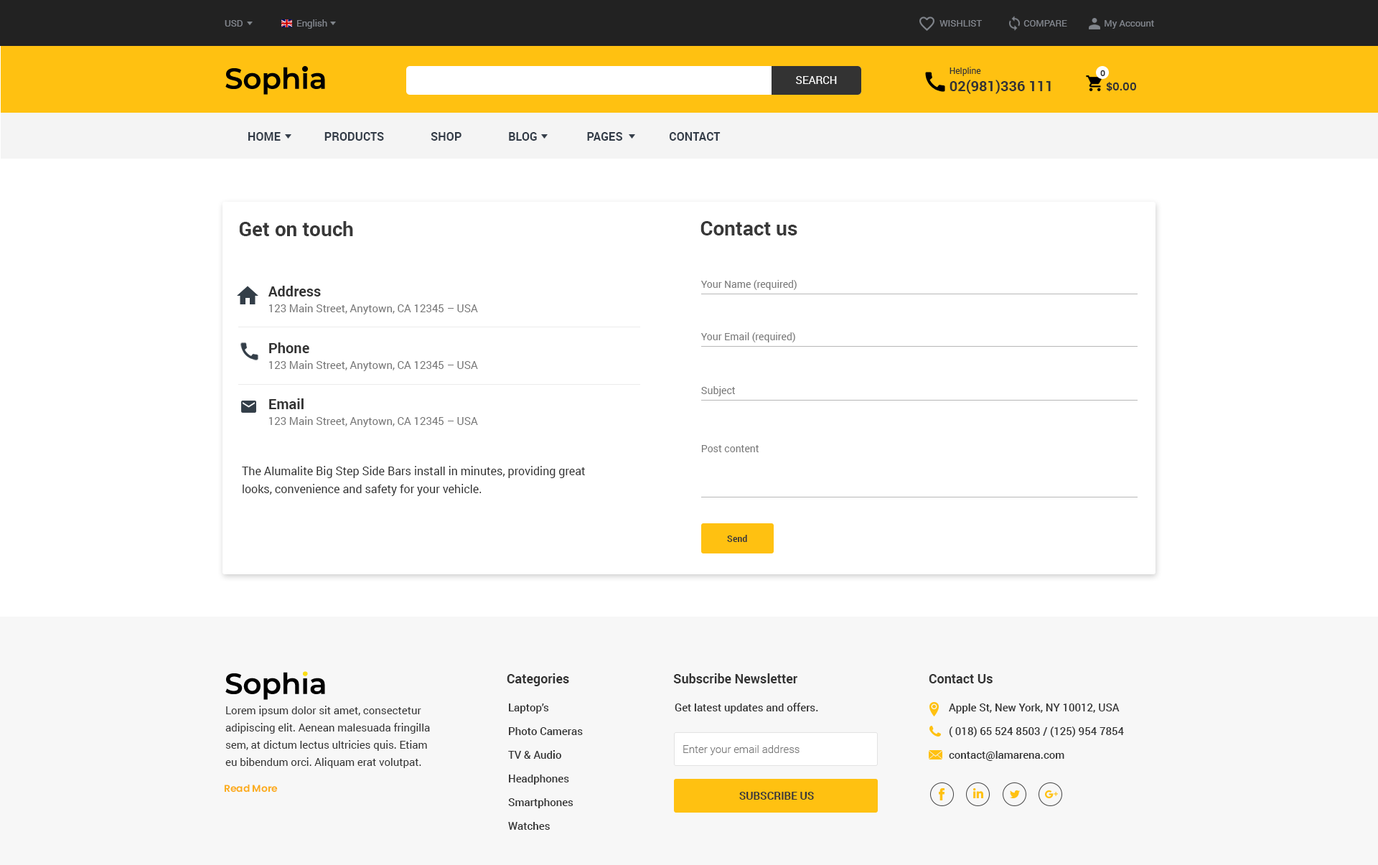
<style>
.page{position:relative;width:1378px;height:865px;background:#ffffff}
.page>*{position:absolute;margin:0}
.t1{font:9.3px "Roboto-Regular";color:#81858c}
.t2{font:10.8px "Roboto-Regular";color:#ffffff}
.t3{font:14.4px "Roboto-Bold";color:#333333}
.t4{font:8.6px "Roboto-Regular";color:#333333}
.t5{font:7.9px "Poppins-SemiBold";color:#333333}
.t6{font:10.8px "Poppins-SemiBold";color:#333333}
.t7{font:11.5px "Roboto-Bold";color:#333c48}
.t8{font:20.1px "Roboto-Bold";color:#383838}
.t9{font:10.1px "Roboto-Regular";color:#777777}
.t10{font:10.8px/15.8px "Roboto-Regular";color:#777777}
.t11{font:14.4px/17.9px "Roboto-Bold";color:#333333}
.t12{font:11.5px/17.9px "Roboto-Regular";color:#333333}
.t13{font:8.7px "Roboto-Bold";color:#383838;scale:1.03 1}
.t14{font:12.9px "Roboto-Bold";color:#333333}
.t15{font:10.8px/17.2px "Roboto-Regular";color:#333333}
.t16{font:10.8px/23.7px "Roboto-Medium";color:#333333}
.t17{font:10.8px "Roboto-Medium";color:#333333}
.t18{font:10.8px "Roboto-Light";color:#777777}
.t19{font:9.7px "Poppins-SemiBold";color:#fbad1a}
.t20{font:10.8px "Roboto-Bold";color:#383838}
</style>
<div class="page">
<p class="t1" style="left:225px;top:20px;width:18px;height:7px">USD</p>
<p class="t1" style="left:297px;top:19px;width:30px;height:10px">English</p>
<p class="t1" style="left:940px;top:20px;width:214px;height:9px">WISHLIST                  COMPARE                My Account</p>
<p class="t2" style="left:796px;top:76px;width:41px;height:8px">SEARCH</p>
<p class="t3" style="left:950px;top:67px;width:101px;height:27px"><span class="t4">Helpline<br></span>02(981)336 111</p>
<p class="t5" style="left:1101px;top:70px;width:5px;height:7px">0</p>
<p class="t6" style="left:1106px;top:82px;width:30px;height:10px">$0.00</p>
<p class="t7" style="left:248px;top:132px;width:473px;height:9px">HOME               PRODUCTS                SHOP                BLOG                 PAGES                CONTACT</p>
<p class="t8" style="left:239px;top:221px;width:114px;height:15px">Get on touch</p>
<p class="t8" style="left:701px;top:221px;width:97px;height:14px">Contact us</p>
<p class="t9" style="left:701px;top:280px;width:96px;height:10px">Your Name (required)</p>
<p class="t10" style="left:268px;top:286px;width:210px;height:28px"><span class="t11">Address<br></span>123 Main Street, Anytown, CA 12345 – USA</p>
<p class="t9" style="left:701px;top:332px;width:94px;height:10px">Your Email (required)</p>
<p class="t10" style="left:269px;top:342px;width:209px;height:29px"><span class="t11">Phone<br></span>123 Main Street, Anytown, CA 12345 – USA</p>
<p class="t9" style="left:701px;top:386px;width:34px;height:10px">Subject</p>
<p class="t10" style="left:269px;top:398px;width:209px;height:29px"><span class="t11">Email<br></span>123 Main Street, Anytown, CA 12345 – USA</p>
<p class="t9" style="left:701px;top:445px;width:58px;height:7px">Post content</p>
<p class="t12" style="left:242px;top:466px;width:343px;height:30px">The Alumalite Big Step Side Bars install in minutes, providing great looks, convenience and safety for your vehicle.</p>
<p class="t13" style="left:727px;top:535px;width:20px;height:7px">Send</p>
<p class="t14" style="left:507px;top:673px;width:62px;height:13px">Categories</p>
<p class="t14" style="left:673px;top:673px;width:125px;height:10px">Subscribe Newsletter</p>
<p class="t14" style="left:929px;top:674px;width:64px;height:9px">Contact Us</p>
<p class="t15" style="left:225px;top:706px;width:205px;height:62px">Lorem ipsum dolor sit amet, consectetur adipiscing elit. Aenean malesuada fringilla sem, at dictum lectus ultricies quis. Etiam eu bibendum orci. Aliquam erat volutpat.</p>
<p class="t16" style="left:508px;top:704px;width:75px;height:126px">Laptop’s<br>Photo Cameras<br>TV &amp; Audio<br>Headphones<br>Smartphones<br>Watches</p>
<p class="t17" style="left:675px;top:703px;width:143px;height:11px">Get latest updates and offers.</p>
<p class="t16" style="left:949px;top:704px;width:175px;height:57px">Apple St, New York, NY 10012, USA<br>( 018) 65 524 8503 / (125) 954 7854<br>contact@lamarena.com</p>
<p class="t18" style="left:683px;top:745px;width:117px;height:10px">Enter your email address</p>
<p class="t19" style="left:224px;top:784px;width:54px;height:9px">Read More</p>
<p class="t20" style="left:739px;top:792px;width:75px;height:8px">SUBSCRIBE US</p>
</div>
